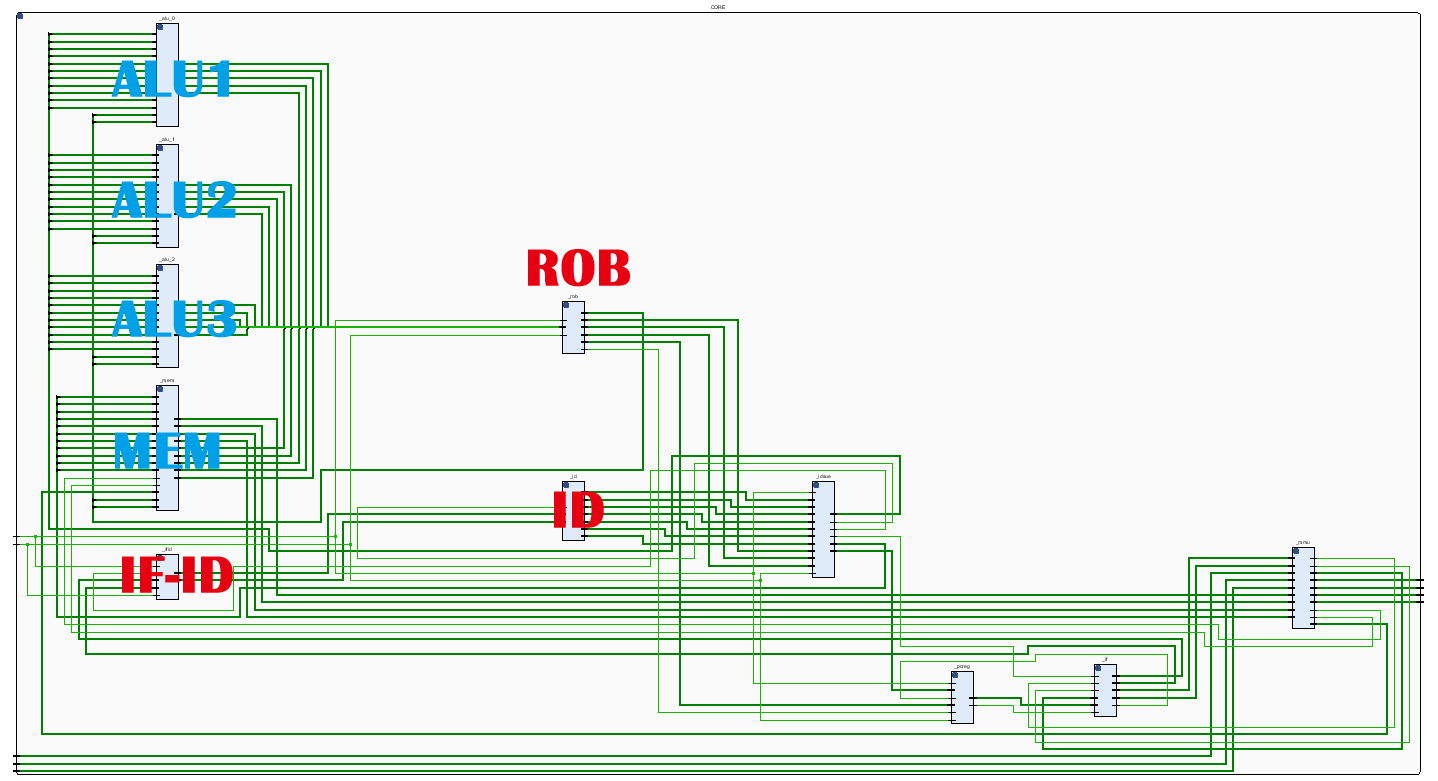
<style>
.page{position:relative;width:1438px;height:781px;background:#fafafa}
.page>*{position:absolute;margin:0}
.t1{font:53.3px "BritannicBold";color:#00a0e8;font-weight:bold}
.t2{font:53.3px "BritannicBold";color:#e60012;font-weight:bold}
</style>
<div class="page">
<p class="t1" style="left:111px;top:60px;width:118px;height:38px">ALU1</p>
<p class="t1" style="left:111px;top:181px;width:125px;height:38px">ALU2</p>
<p class="t2" style="left:528px;top:249px;width:102px;height:38px">ROB</p>
<p class="t1" style="left:111px;top:300px;width:126px;height:38px">ALU3</p>
<p class="t1" style="left:115px;top:432px;width:105px;height:37px">MEM</p>
<p class="t2" style="left:554px;top:491px;width:50px;height:37px">ID</p>
<p class="t2" style="left:122px;top:556px;width:111px;height:37px">IF-ID</p>
</div>
